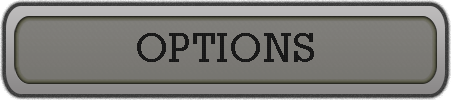
<style>
.page{position:relative;width:451px;height:100px}
.page>*{position:absolute;margin:0}
.t1{font:41.7px "Rockwell";color:#1a1a1a}
</style>
<div class="page">
<p class="t1" style="left:137px;top:33px;width:177px;height:29px">OPTIONS</p>
</div>
